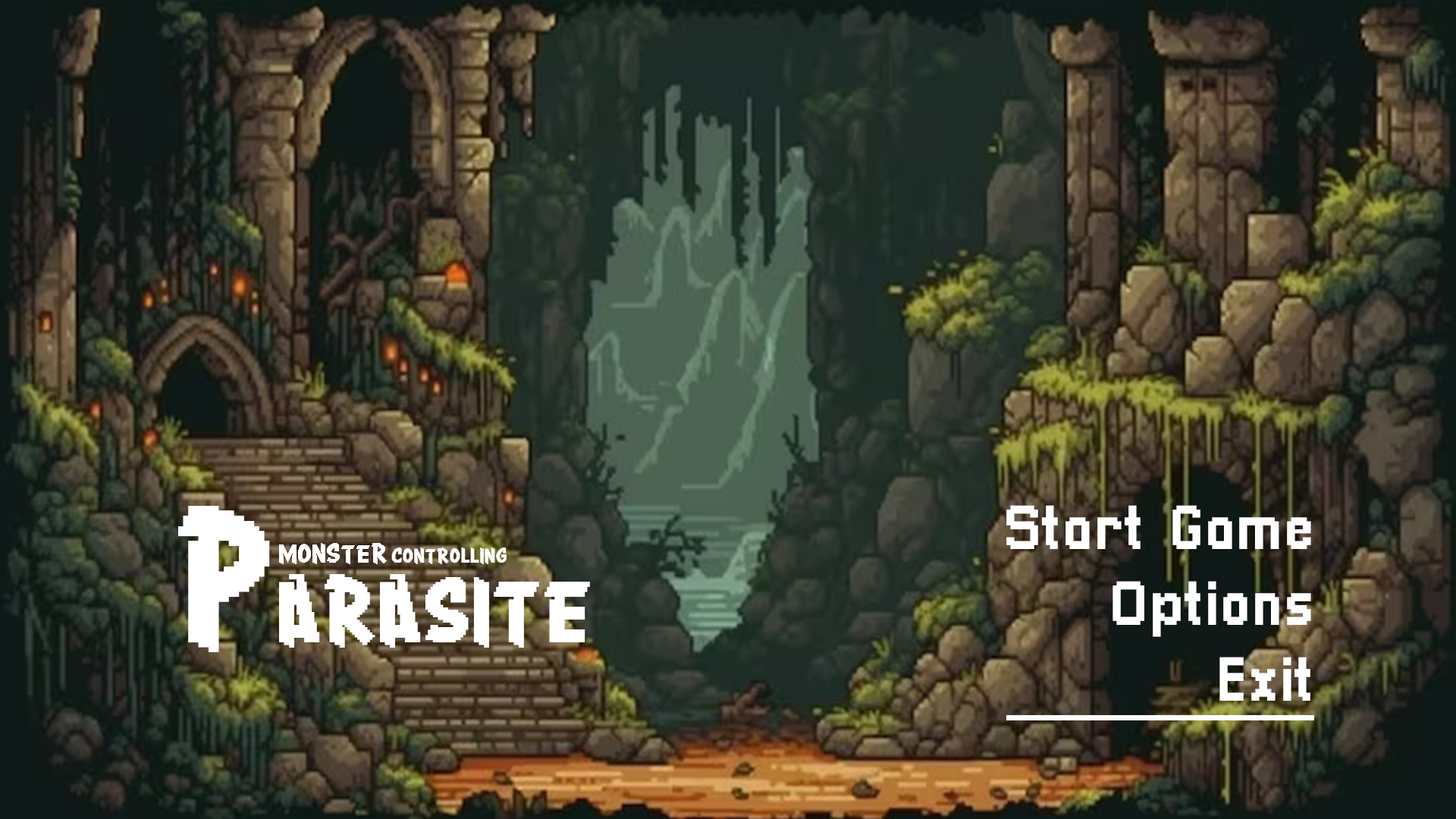
<style>
.page{position:relative;width:1456px;height:819px}
.page>*{position:absolute;margin:0}
.t1{font:63.2px "Crang";color:#ffffff}
.t2{font:126.4px "Crang";color:#ffffff}
.t3{font:63.2px "Pixellari";color:#ffffff}
.t4{font:14.7px "Crang";color:#ffffff}
.t5{font:19px "Crang";color:#ffffff}
</style>
<div class="page">
<p class="t1" style="left:178px;top:506px;width:412px;height:146px"><span class="t2">P</span>ARASITE</p>
<p class="t3" style="left:1006px;top:505px;width:305px;height:196px;text-align:right">Start Game<br>Options<br>Exit</p>
<p class="t4" style="left:279px;top:543px;width:228px;height:21px"><span class="t5">MONSTER</span> CONTROLLING</p>
</div>
